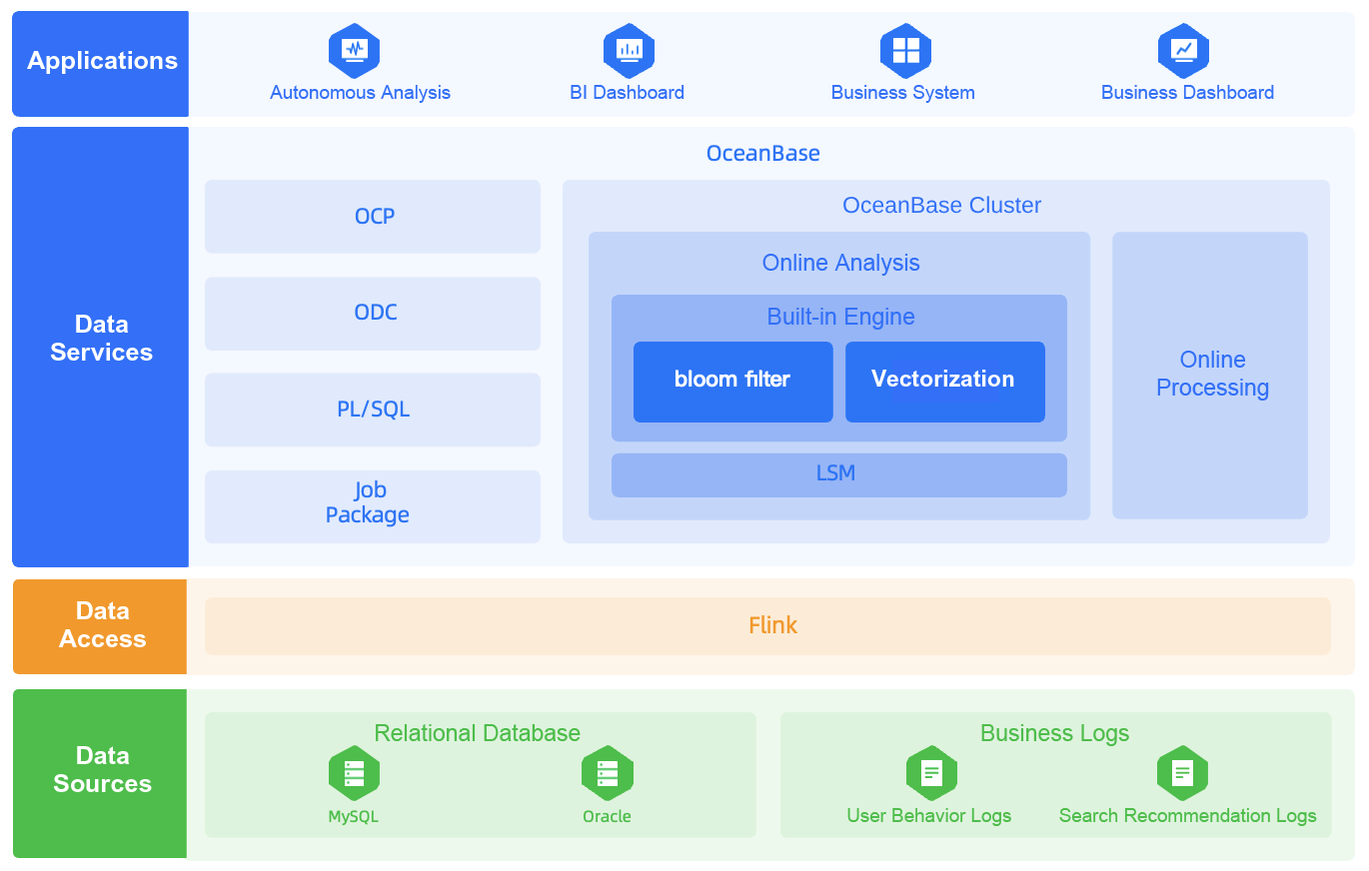
<style>
.page{position:relative;width:1369px;height:871px}
.page>*{position:absolute;margin:0}
.t1{font:25.2px "Arial-BoldMT";color:#ffffff}
.t2{font:18.8px "ArialMT";color:#3370f7}
.t3{font:23px "ArialMT";color:#3370f7}
.t4{font:25.2px/28px "Arial-BoldMT";color:#ffffff}
.t5{font:23px/28px "ArialMT";color:#3370f7}
.t6{font:23px "Arial-BoldMT";color:#ffffff}
.t7{font:23px "ArialMT";color:#4dbd4b}
.t8{font:18.8px "ArialMT";color:#4ebd4b}
</style>
<div class="page">
<p class="t1" style="left:27px;top:51px;width:151px;height:23px">Applications</p>
<p class="t2" style="left:270px;top:85px;width:181px;height:18px">Autonomous Analysis</p>
<p class="t2" style="left:570px;top:85px;width:114px;height:14px">BI Dashboard</p>
<p class="t2" style="left:832px;top:85px;width:142px;height:18px">Business System</p>
<p class="t2" style="left:1102px;top:85px;width:172px;height:14px">Business Dashboard</p>
<p class="t3" style="left:843px;top:196px;width:199px;height:18px">OceanBase Cluster</p>
<p class="t3" style="left:762px;top:254px;width:158px;height:22px">Online Analysis</p>
<p class="t4" style="left:50px;top:315px;width:103px;height:46px;text-align:center">Data<br>Services</p>
<p class="t3" style="left:768px;top:308px;width:147px;height:22px">Built-in Engine</p>
<p class="t5" style="left:1157px;top:351px;width:112px;height:50px;text-align:center">Online<br>Processing</p>
<p class="t6" style="left:871px;top:370px;width:143px;height:17px">Vectorization</p>
<p class="t4" style="left:58px;top:601px;width:88px;height:46px;text-align:center">Data<br>Access</p>
<p class="t7" style="left:376px;top:724px;width:204px;height:17px">Relational Database</p>
<p class="t7" style="left:981px;top:724px;width:148px;height:22px">Business Logs</p>
<p class="t4" style="left:53px;top:746px;width:99px;height:46px;text-align:center">Data<br>Sources</p>
<p class="t8" style="left:847px;top:808px;width:164px;height:18px">User Behavior Logs</p>
<p class="t8" style="left:1059px;top:808px;width:258px;height:18px">Search Recommendation Logs</p>
</div>
